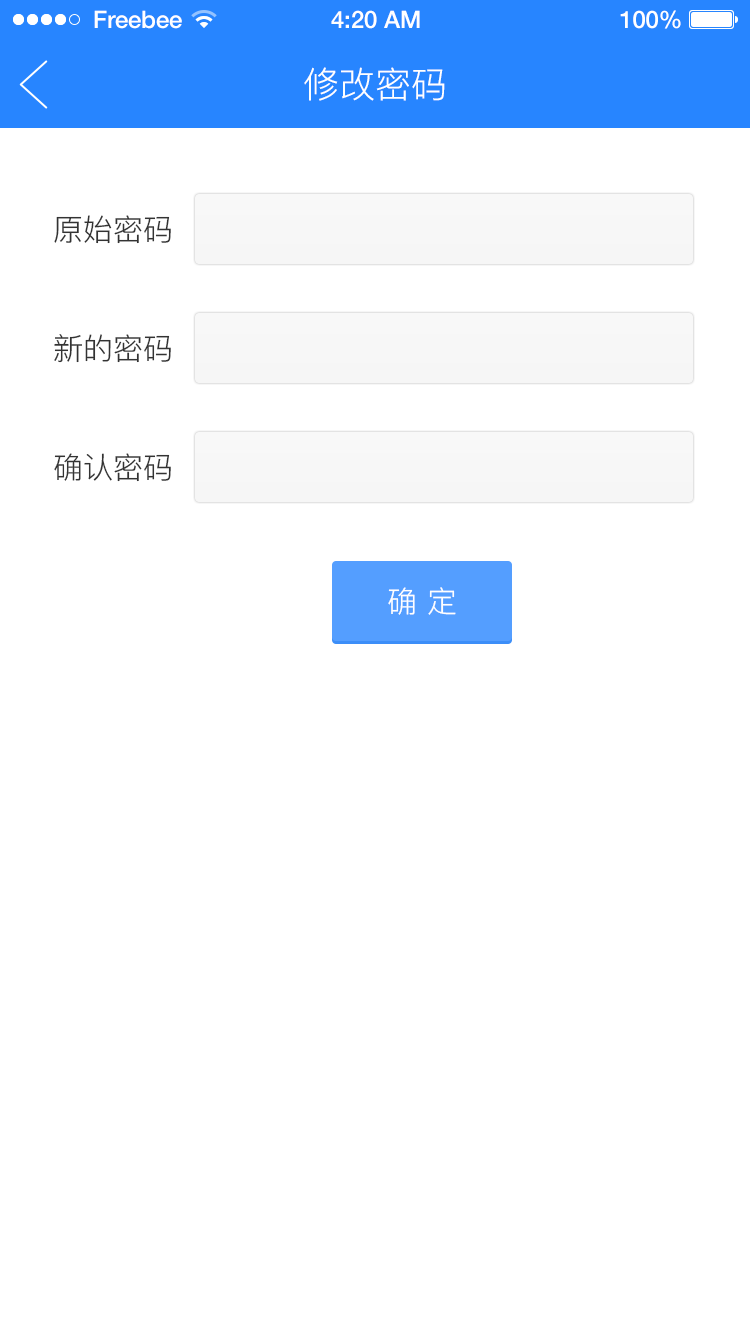
<style>
.page{position:relative;width:750px;height:1336px;background:#ffffff}
.page>*{position:absolute;margin:0}
.t1{font:24px "HelveticaNeue-Medium";color:#ffffff}
.t2{font:36px "PingFang-SC-Regular";color:#ffffff}
.t3{font:30px "PingFang-SC-Regular";color:#333333}
.t4{font:30px "PingFang-SC-Regular";color:#ffffff}
</style>
<div class="page">
<p class="t1" style="left:94px;top:10px;width:88px;height:19px">Freebee</p>
<p class="t1" style="left:331px;top:10px;width:89px;height:19px">4:20 AM</p>
<p class="t1" style="left:620px;top:10px;width:61px;height:19px">100%</p>
<p class="t2" style="left:304px;top:67px;width:141px;height:34px">修改密码</p>
<p class="t3" style="left:54px;top:215px;width:117px;height:29px">原始密码</p>
<p class="t3" style="left:54px;top:334px;width:117px;height:29px">新的密码</p>
<p class="t3" style="left:54px;top:453px;width:117px;height:29px">确认密码</p>
<p class="t4" style="left:388px;top:587px;width:68px;height:28px">确 定</p>
</div>
